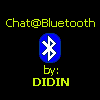
<style>
.page{position:relative;width:100px;height:100px;background:#000000}
.page>*{position:absolute;margin:0}
.t1{font:10.8px "Tahoma";color:#c7f50f;scale:1.11 1}
.t2{font:10.8px "Tahoma";color:#c7f50f;font-weight:bold;scale:1.11 1}
</style>
<div class="page">
<p class="t1" style="left:6px;top:18px;width:89px;height:10px">Chat@Bluetooth</p>
<p class="t1" style="left:44px;top:65px;width:14px;height:11px">by:</p>
<p class="t2" style="left:33px;top:78px;width:36px;height:8px">DIDIN</p>
</div>
